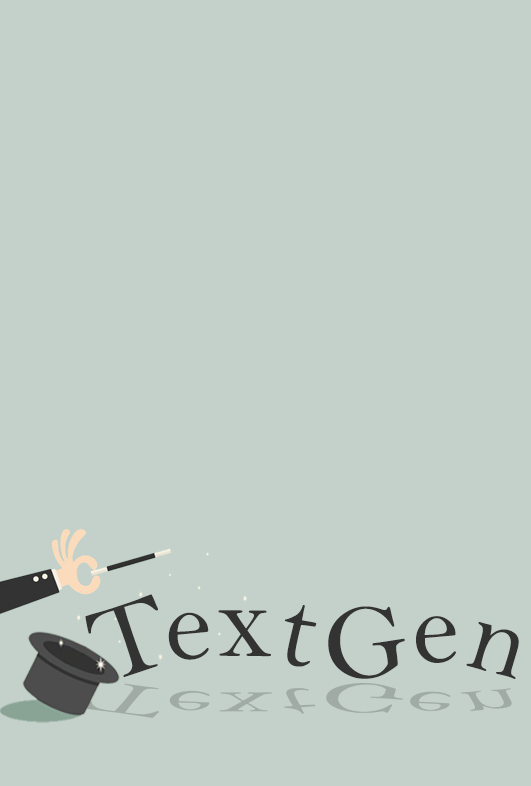
<style>
.page{position:relative;width:531px;height:786px;background:#c4d1ca}
.page>*{position:absolute;margin:0}
.t1{font:108.5px "BellMT";color:#333333}
</style>
<div class="page">
<p class="t1" style="left:85px;top:594px;width:73px;height:83px;rotate:-18deg">T</p>
<p class="t1" style="left:284px;top:605px;width:33px;height:62px;rotate:11deg">t</p>
<p class="t1" style="left:328px;top:606px;width:77px;height:73px;rotate:-8deg">G</p>
<p class="t1" style="left:168px;top:612px;width:41px;height:48px;rotate:-4deg">e</p>
<p class="t1" style="left:218px;top:610px;width:53px;height:47px">x</p>
<p class="t1" style="left:416px;top:616px;width:40px;height:47px;rotate:-4deg">e</p>
<p class="t1" style="left:466px;top:622px;width:53px;height:57px;rotate:16deg">n</p>
</div>
